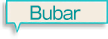
<style>
.page{position:relative;width:108px;height:39px;background:#f4ece0}
.page>*{position:absolute;margin:0}
.t1{font:18px "GothicMB101Pro-Medium";letter-spacing:-0.04em;color:#009799;scale:0.9 1}
</style>
<div class="page">
<p class="t1" style="left:30px;top:5px;width:51px;height:15px">Bubar</p>
</div>
